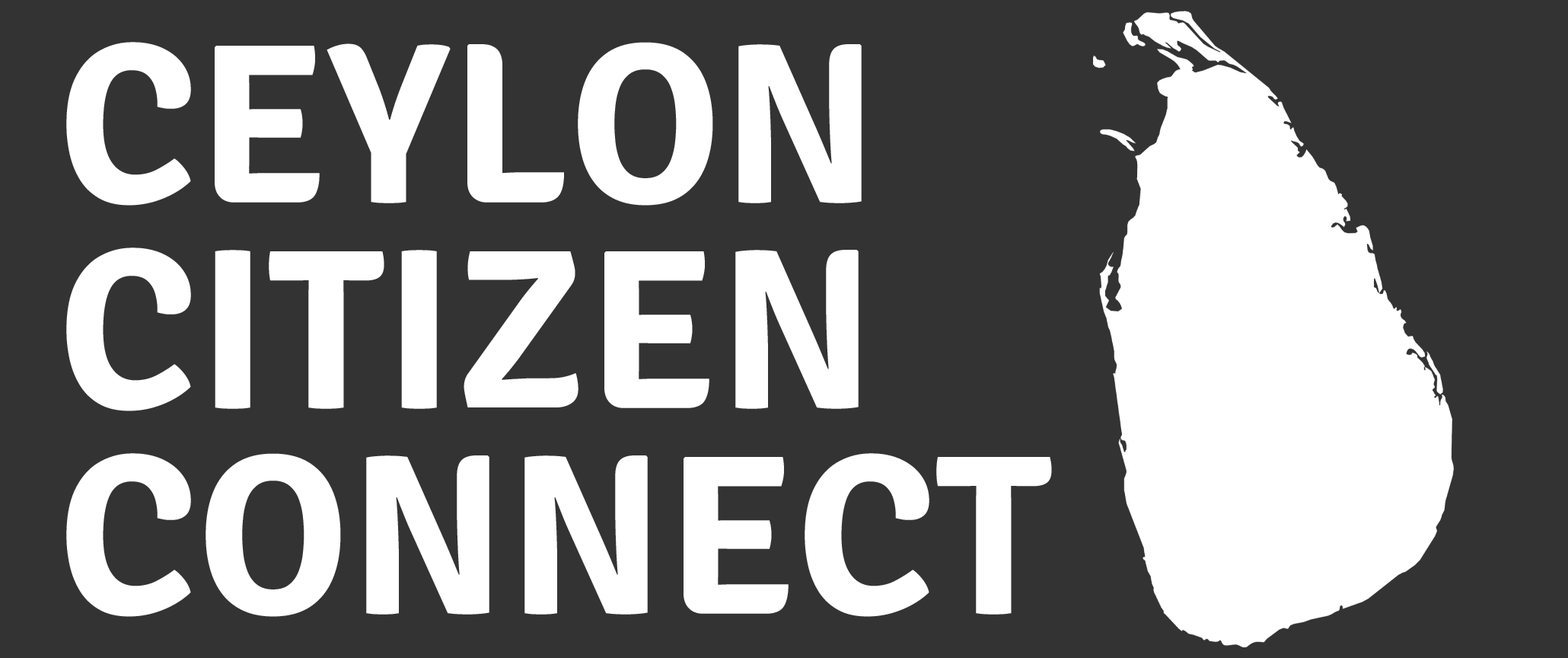
<style>
.page{position:relative;width:1568px;height:658px;background:#333333}
.page>*{position:absolute;margin:0}
.t1{font:228.3px/205.5px "SignikaNegative-Bold";color:#ffffff}
</style>
<div class="page">
<p class="t1" style="left:66px;top:42px;width:986px;height:575px;text-align:right">CEYLON <br>CITIZEN <br>CONNECT</p>
</div>
